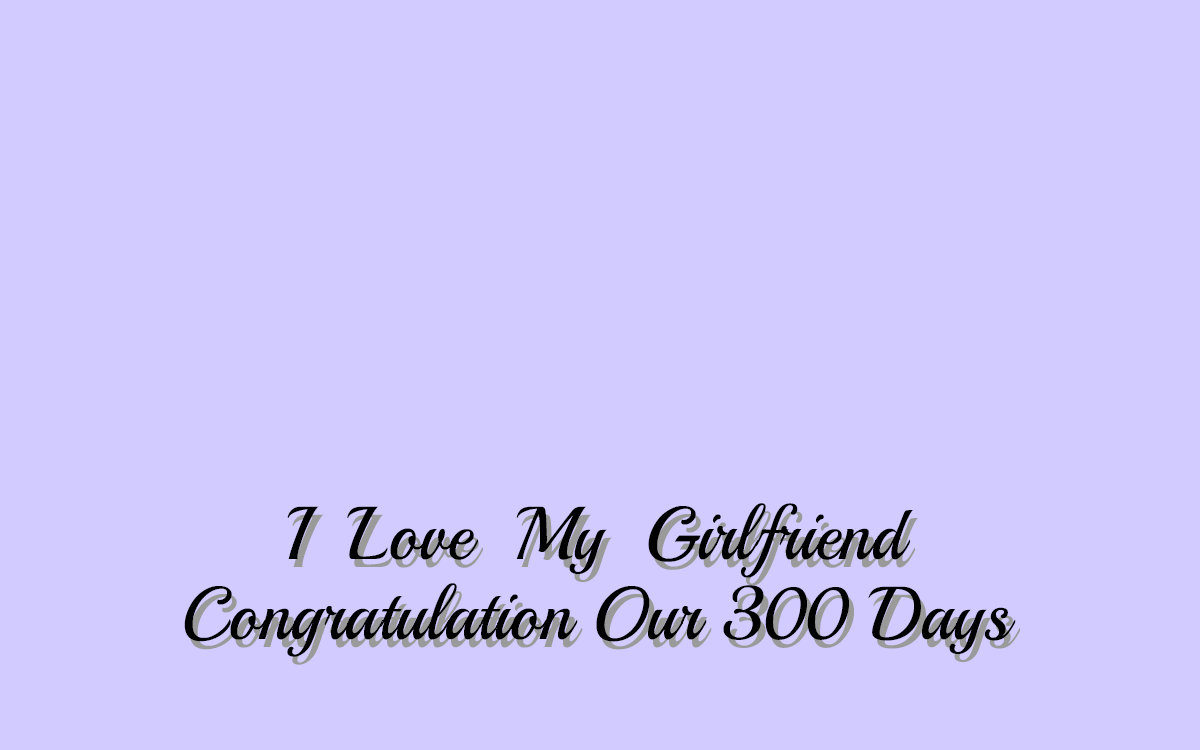
<style>
.page{position:relative;width:1200px;height:750px;background:#d1cbff}
.page>*{position:absolute;margin:0}
.t1{font:74.9px/80px "Playball-Regular";color:#000000;scale:0.93 1}
.t2{font:74.9px/80px "Playball-Regular";color:#9a9a9a;scale:0.93 1}
</style>
<div class="page">
<p class="t1" style="left:184px;top:503px;width:832px;height:154px;text-align:center">I  Love  My  Girlfriend<br>Congratulation Our 300 Days</p>
<p class="t2" style="left:189px;top:511px;width:831px;height:154px;text-align:center">I  Love  My  Girlfriend<br>Congratulation Our 300 Days</p>
</div>
